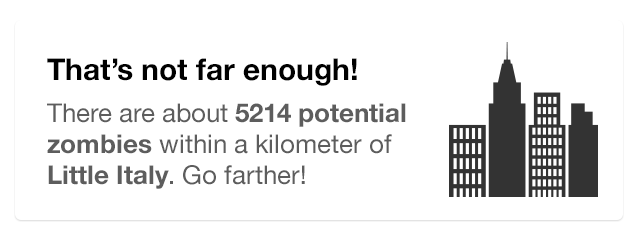
<style>
.page{position:relative;width:640px;height:240px;background:#ffffff}
.page>*{position:absolute;margin:0}
.t1{font:30px "HelveticaNeue-Bold";color:#000000}
.t2{font:26px "HelveticaNeue";color:#5d5d5d}
.t3{font:26px "HelveticaNeue-Bold";color:#5d5d5d}
</style>
<div class="page">
<p class="t1" style="left:47px;top:58px;width:359px;height:131px">That’s not far enough! <br><span class="t2">There are about </span><span class="t3">5214 potential zombies </span><span class="t2">within a kilometer of </span><span class="t3">Little Italy</span><span class="t2">. Go farther!</span></p>
</div>
